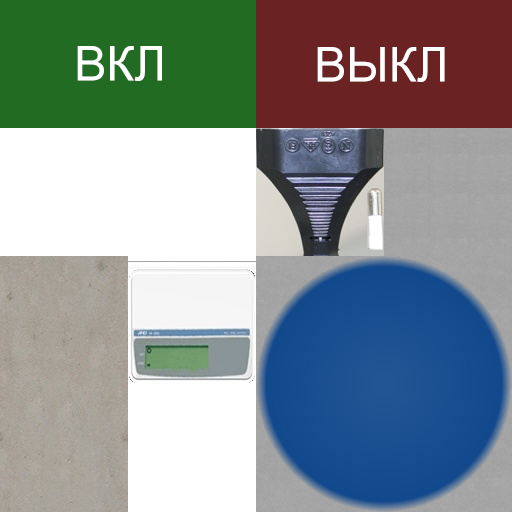
<style>
.page{position:relative;width:512px;height:512px}
.page>*{position:absolute;margin:0}
.t1{font:48px "ArialMT";color:#ffffff}
</style>
<div class="page">
<p class="t1" style="left:77px;top:46px;width:85px;height:35px">ВКЛ</p>
<p class="t1" style="left:317px;top:47px;width:128px;height:35px">ВЫКЛ</p>
</div>
